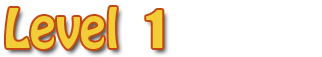
<style>
.page{position:relative;width:322px;height:57px;background:#ffffff}
.page>*{position:absolute;margin:0}
.t1{font:48px "HoboStd";color:#f2cd38}
.t2{font:48px "Impact";color:#f2cd38}
</style>
<div class="page">
<p class="t1" style="left:6px;top:7px;width:157px;height:42px">Level  <span class="t2">1</span></p>
</div>
